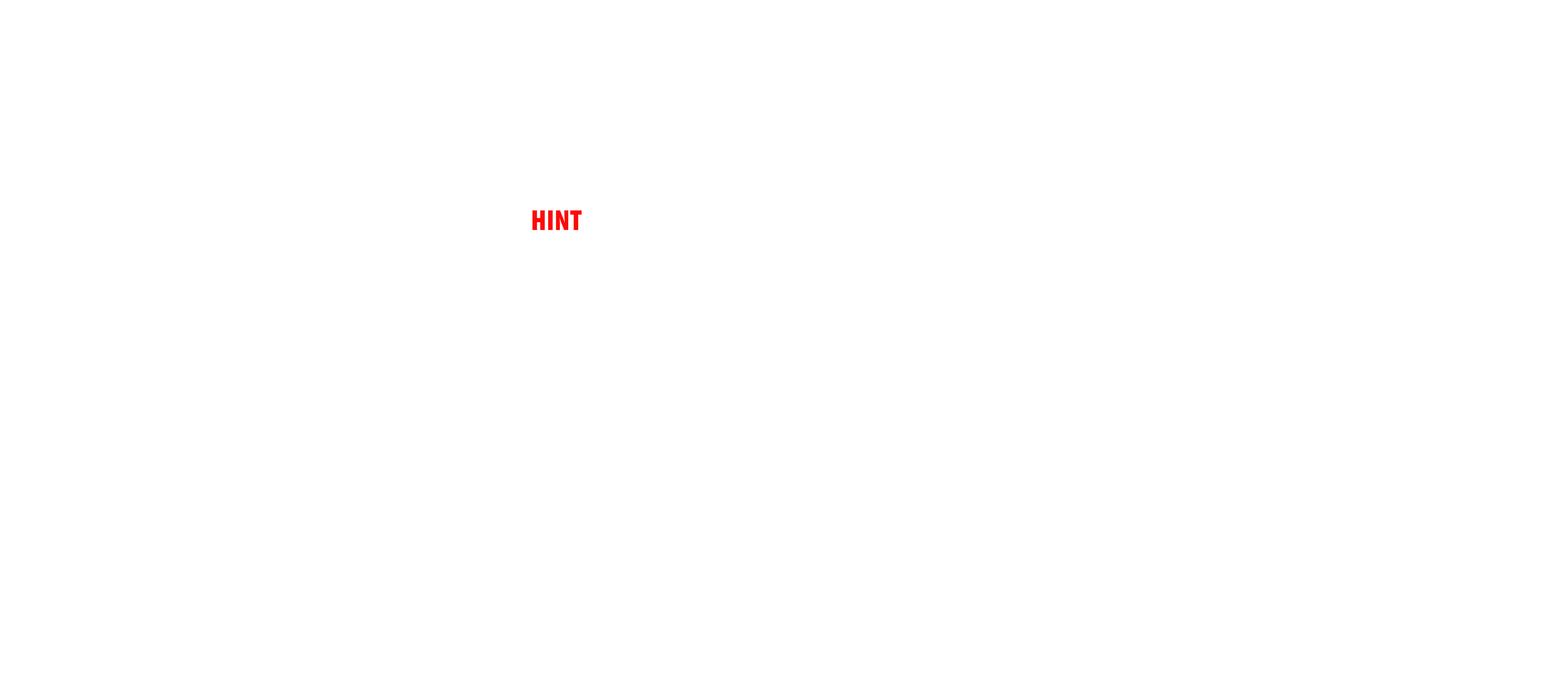
<style>
.page{position:relative;width:1568px;height:697px;background:#ffffff}
.page>*{position:absolute;margin:0}
.t1{font:29px "MyriadConceptRoman-BlackCondensed";color:#ff0909}
</style>
<div class="page">
<p class="t1" style="left:532px;top:210px;width:50px;height:20px">HINT</p>
</div>
